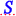
<style>
.page{position:relative;width:16px;height:16px;background:#ffffff}
.page>*{position:absolute;margin:0}
.t1{font:18.7px "FangSong_GB2312";color:#1200ff;text-transform:uppercase;font-weight:bold;font-style:italic}
.t2{font:8px "FangSong_GB2312";color:#ff001e;text-transform:uppercase;font-weight:bold;font-style:italic}
</style>
<div class="page">
<p class="t1" style="left:3px;top:0px;width:10px;height:14px">S</p>
<p class="t2" style="left:0px;top:13px;width:15px;height:3px">....</p>
</div>
